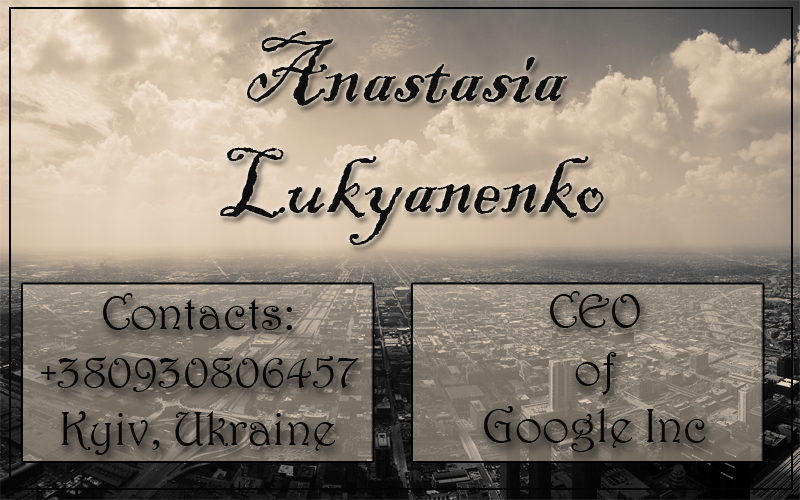
<style>
.page{position:relative;width:800px;height:500px}
.page>*{position:absolute;margin:0}
.t1{font:91.8px "BlackadderITC-Regular";color:#0f0e0e}
.t2{font:48px "Harrington";color:#050505}
</style>
<div class="page">
<p class="t1" style="left:220px;top:31px;width:384px;height:214px;text-align:center">Anastasia <br>Lukyanenko</p>
<p class="t2" style="left:41px;top:293px;width:318px;height:162px;text-align:center">Contacts:<br>+380930806457<br>Kyiv, Ukraine</p>
<p class="t2" style="left:484px;top:291px;width:222px;height:161px;text-align:center">CEO <br>of <br>Google Inc</p>
</div>
